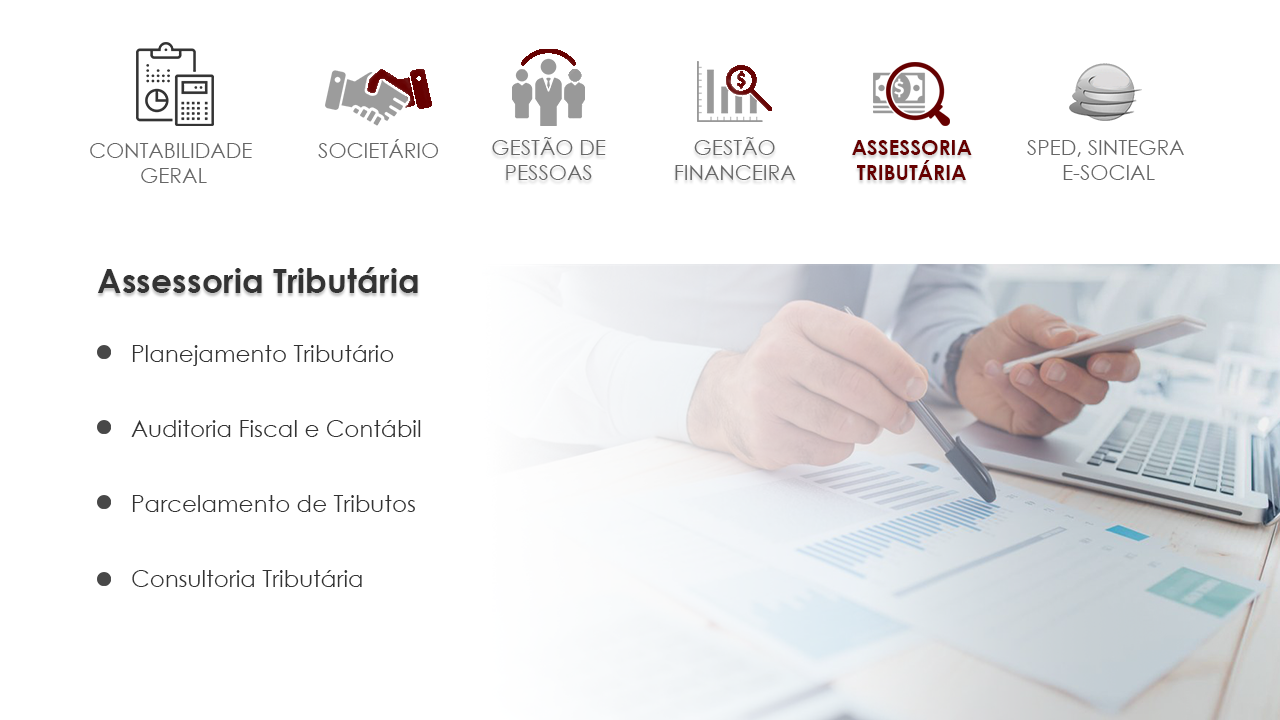
<style>
.page{position:relative;width:1280px;height:720px;background:#ffffff}
.page>*{position:absolute;margin:0}
.t1{font:20.8px/25px "CenturyGothic";color:#666666}
.t2{font:20.8px "CenturyGothic";color:#666666}
.t3{font:20.8px/25px "CenturyGothic-Bold";color:#660000}
.t4{font:33.3px "CenturyGothic-Bold";color:#333333}
.t5{font:22.9px/25px "CenturyGothic";color:#333333}
</style>
<div class="page">
<p class="t1" style="left:492px;top:137px;width:114px;height:43px;text-align:center">GESTÃO DE <br>PESSOAS</p>
<p class="t1" style="left:675px;top:137px;width:121px;height:43px;text-align:center">GESTÃO<br>FINANCEIRA</p>
<p class="t1" style="left:90px;top:143px;width:162px;height:40px;text-align:center">CONTABILIDADE<br> GERAL</p>
<p class="t2" style="left:318px;top:139px;width:121px;height:19px">SOCIETÁRIO</p>
<p class="t3" style="left:852px;top:140px;width:120px;height:40px;text-align:center">ASSESSORIA<br>TRIBUTÁRIA</p>
<p class="t1" style="left:1027px;top:140px;width:157px;height:40px;text-align:center">SPED, SINTEGRA<br> E-SOCIAL</p>
<p class="t4" style="left:98px;top:267px;width:320px;height:26px">Assessoria Tributária</p>
<p class="t5" style="left:131px;top:345px;width:290px;height:242px">Planejamento Tributário<br><br><br>Auditoria Fiscal e Contábil<br><br><br>Parcelamento de Tributos<br><br><br>Consultoria Tributária</p>
</div>
